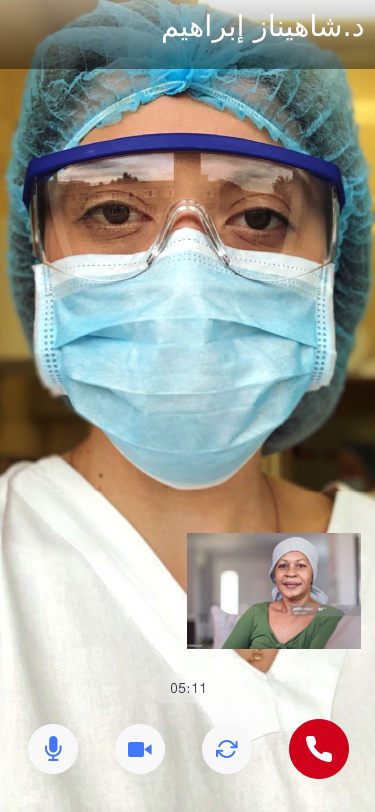
<style>
.page{position:relative;width:375px;height:812px}
.page>*{position:absolute;margin:0}
.t1{font:29px "DejaVuSans";color:#ffffff}
</style>
<div class="page">
<p class="t1" style="left:162px;top:13px;width:201px;height:31px">د.شاهيناز إبراهيم</p>
</div>
